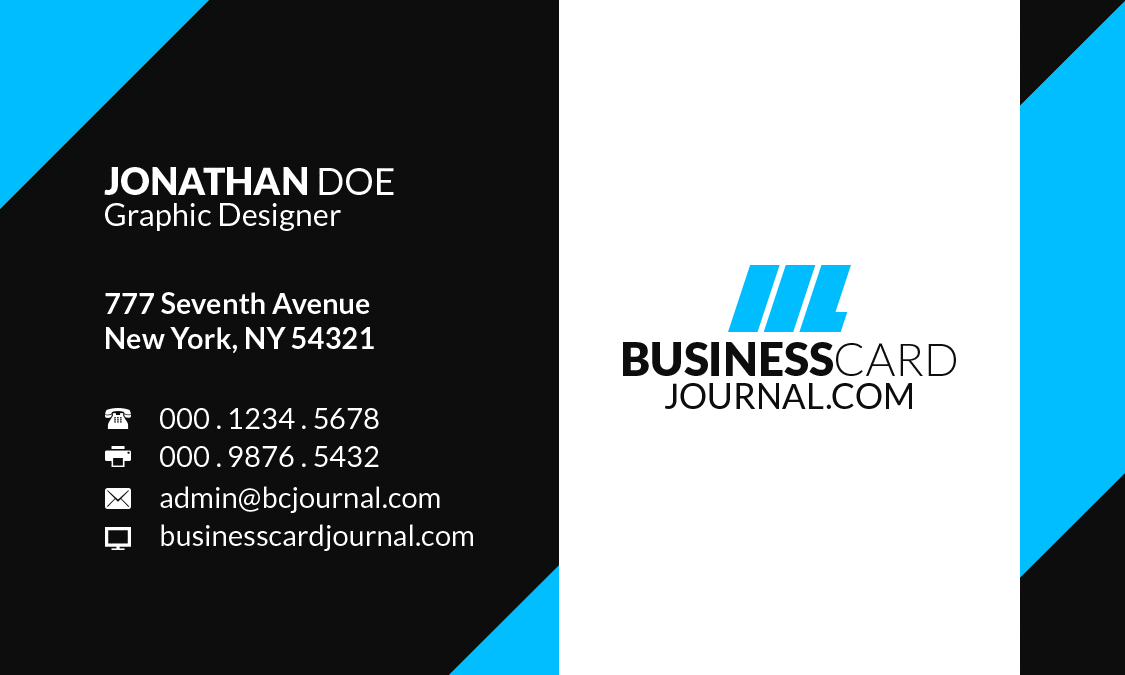
<style>
.page{position:relative;width:1125px;height:675px;background:#0d0d0d}
.page>*{position:absolute;margin:0}
.t1{font:37.5px "Lato-Black";color:#ffffff}
.t2{font:37.5px "Lato-Regular";color:#ffffff}
.t3{font:31.2px "Lato-Regular";color:#ffffff}
.t4{font:29.2px "Lato-Bold";color:#ffffff}
.t5{font:35px/33.3px "Lato-Regular";color:#0d0d0d}
.t6{font:45.8px/33.3px "Lato-Black";color:#0d0d0d}
.t7{font:45.8px/33.3px "Lato-Light";color:#0d0d0d}
.t8{font:29.2px/37.5px "Lato-Regular";color:#ffffff}
</style>
<div class="page">
<p class="t1" style="left:104px;top:167px;width:290px;height:28px">JONATHAN <span class="t2">DOE</span></p>
<p class="t3" style="left:105px;top:203px;width:236px;height:28px">Graphic Designer</p>
<p class="t4" style="left:105px;top:292px;width:269px;height:62px">777 Seventh Avenue<br>New York, NY 54321</p>
<p class="t5" style="left:623px;top:342px;width:333px;height:67px;text-align:center"><span class="t6">BUSINESS</span><span class="t7">CARD<br></span>JOURNAL.COM</p>
<p class="t8" style="left:160px;top:408px;width:219px;height:59px">000 . 1234 . 5678<br>000 . 9876 . 5432</p>
<p class="t8" style="left:160px;top:486px;width:313px;height:65px">admin@bcjournal.com<br>businesscardjournal.com</p>
</div>
